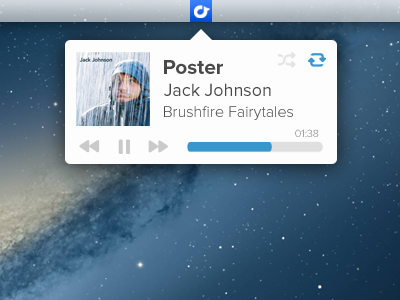
<style>
.page{position:relative;width:400px;height:300px;background:#fdfdfd}
.page>*{position:absolute;margin:0}
.t1{font:20.8px "ProximaNova-Bold";color:#494949}
.t2{font:18px "ProximaNova-Regular";color:#494949}
.t3{font:16px "ProximaNova-Light";color:#494949}
.t4{font:10.7px "ProximaNova-Light"}
</style>
<div class="page">
<p class="t1" style="left:164px;top:60px;width:59px;height:14px">Poster</p>
<p class="t2" style="left:164px;top:83px;width:107px;height:13px">Jack Johnson</p>
<p class="t3" style="left:164px;top:106px;width:129px;height:14px">Brushfire Fairytales</p>
<p class="t4" style="left:295px;top:129px;width:24px;height:8px">01:38</p>
</div>
